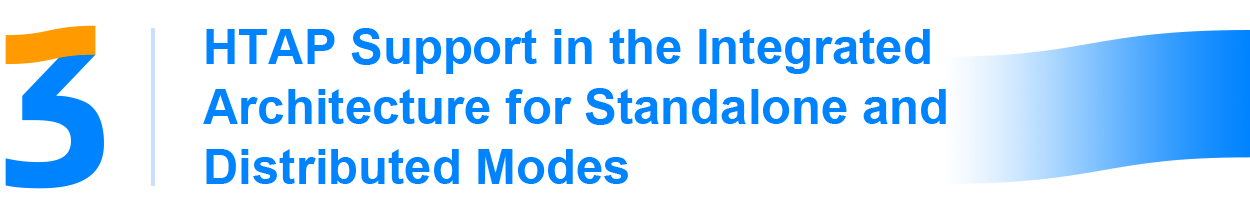
<style>
.page{position:relative;width:1250px;height:216px;background:#ffffff}
.page>*{position:absolute;margin:0}
.t1{font:49px/60px "Arial-BoldMT";color:#0083ff}
</style>
<div class="page">
<p class="t1" style="left:203px;top:28px;width:743px;height:156px">HTAP Support in the Integrated Architecture for Standalone and Distributed Modes</p>
</div>
